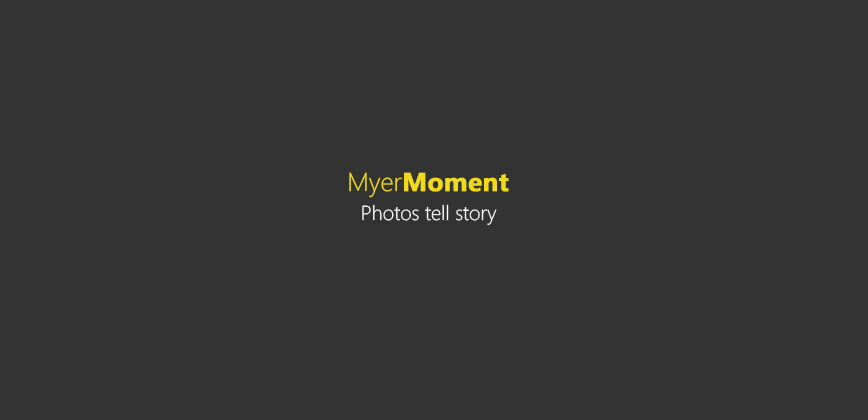
<style>
.page{position:relative;width:868px;height:420px;background:#333333}
.page>*{position:absolute;margin:0}
.t1{font:23.9px "MicrosoftYaHeiUI-Bold";color:#f1da19;font-weight:bold}
.t2{font:23.9px "MicrosoftYaHeiUILight";color:#f1da19}
.t3{font:20.3px "SegoeWP-Light";color:#ffffff}
</style>
<div class="page">
<p class="t1" style="left:349px;top:172px;width:160px;height:26px"><span class="t2">Myer</span>Moment</p>
<p class="t3" style="left:362px;top:204px;width:135px;height:21px">Photos tell story</p>
</div>
